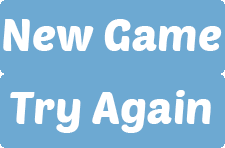
<style>
.page{position:relative;width:225px;height:148px;background:#6da9d2}
.page>*{position:absolute;margin:0}
.t1{font:45px "PoetsenOne-Regular";color:#ffffff}
</style>
<div class="page">
<p class="t1" style="left:3px;top:19px;width:219px;height:32px">New Game</p>
<p class="t1" style="left:10px;top:90px;width:201px;height:43px">Try Again</p>
</div>
